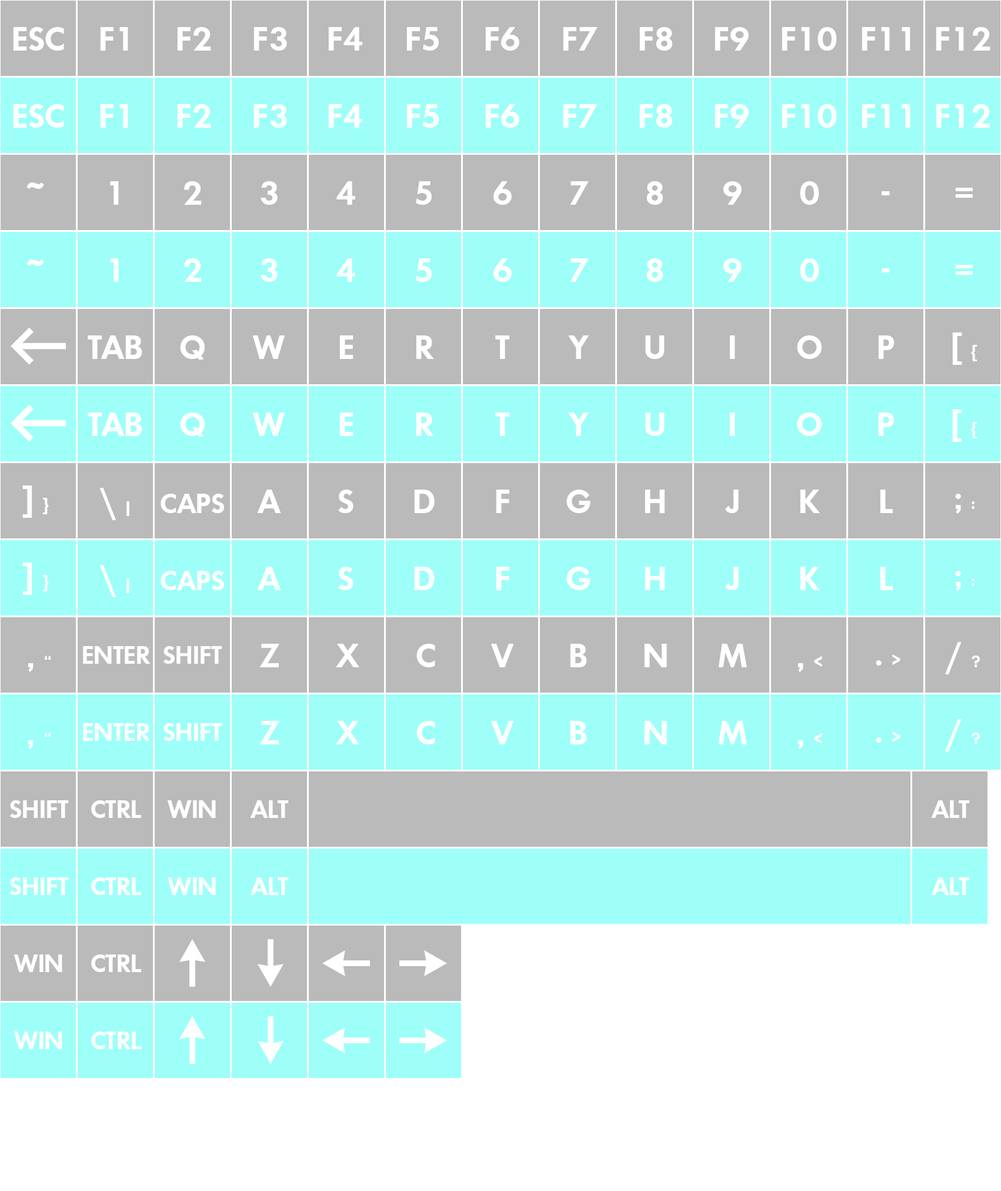
<style>
.page{position:relative;width:1001px;height:1191px;background:#bababa}
.page>*{position:absolute;margin:0}
.t1{font:35.3px "FuturaNo2D-DemiBold";color:#ffffff}
.t2{font:17.7px "FuturaNo2D-DemiBold";color:#ffffff}
.t3{font:29.4px "FuturaNo2D-DemiBold";color:#ffffff}
.t4{font:26.5px "FuturaNo2D-DemiBold";color:#ffffff}
</style>
<div class="page">
<p class="t1" style="left:13px;top:27px;width:51px;height:24px">ESC</p>
<p class="t1" style="left:100px;top:27px;width:28px;height:24px">F1</p>
<p class="t1" style="left:177px;top:27px;width:34px;height:24px">F2</p>
<p class="t1" style="left:254px;top:27px;width:33px;height:24px">F3</p>
<p class="t1" style="left:328px;top:27px;width:34px;height:24px">F4</p>
<p class="t1" style="left:407px;top:27px;width:32px;height:24px">F5</p>
<p class="t1" style="left:485px;top:27px;width:35px;height:24px">F6</p>
<p class="t1" style="left:563px;top:27px;width:35px;height:24px">F7</p>
<p class="t1" style="left:640px;top:27px;width:32px;height:24px">F8</p>
<p class="t1" style="left:715px;top:27px;width:34px;height:24px">F9</p>
<p class="t1" style="left:782px;top:27px;width:55px;height:24px">F10</p>
<p class="t1" style="left:862px;top:27px;width:49px;height:24px">F11</p>
<p class="t1" style="left:936px;top:27px;width:55px;height:24px">F12</p>
<p class="t1" style="left:13px;top:104px;width:51px;height:24px">ESC</p>
<p class="t1" style="left:100px;top:104px;width:28px;height:24px">F1</p>
<p class="t1" style="left:177px;top:104px;width:34px;height:24px">F2</p>
<p class="t1" style="left:254px;top:104px;width:33px;height:24px">F3</p>
<p class="t1" style="left:328px;top:104px;width:34px;height:24px">F4</p>
<p class="t1" style="left:407px;top:104px;width:32px;height:24px">F5</p>
<p class="t1" style="left:485px;top:104px;width:35px;height:24px">F6</p>
<p class="t1" style="left:563px;top:104px;width:35px;height:24px">F7</p>
<p class="t1" style="left:640px;top:104px;width:32px;height:24px">F8</p>
<p class="t1" style="left:715px;top:104px;width:34px;height:24px">F9</p>
<p class="t1" style="left:782px;top:104px;width:55px;height:24px">F10</p>
<p class="t1" style="left:862px;top:104px;width:49px;height:24px">F11</p>
<p class="t1" style="left:936px;top:104px;width:55px;height:24px">F12</p>
<p class="t1" style="left:26px;top:182px;width:18px;height:7px">~</p>
<p class="t1" style="left:110px;top:181px;width:9px;height:24px">1</p>
<p class="t1" style="left:184px;top:181px;width:18px;height:24px">2</p>
<p class="t1" style="left:261px;top:181px;width:17px;height:24px">3</p>
<p class="t1" style="left:337px;top:181px;width:18px;height:24px">4</p>
<p class="t1" style="left:416px;top:181px;width:16px;height:24px">5</p>
<p class="t1" style="left:494px;top:181px;width:18px;height:24px">6</p>
<p class="t1" style="left:570px;top:181px;width:19px;height:24px">7</p>
<p class="t1" style="left:647px;top:181px;width:16px;height:24px">8</p>
<p class="t1" style="left:724px;top:181px;width:18px;height:24px">9</p>
<p class="t1" style="left:800px;top:181px;width:20px;height:24px">0</p>
<p class="t1" style="left:882px;top:191px;width:8px;height:4px">-</p>
<p class="t1" style="left:955px;top:188px;width:18px;height:10px">=</p>
<p class="t1" style="left:26px;top:259px;width:18px;height:7px">~</p>
<p class="t1" style="left:110px;top:258px;width:9px;height:24px">1</p>
<p class="t1" style="left:184px;top:258px;width:18px;height:24px">2</p>
<p class="t1" style="left:261px;top:258px;width:17px;height:24px">3</p>
<p class="t1" style="left:337px;top:258px;width:18px;height:24px">4</p>
<p class="t1" style="left:416px;top:258px;width:16px;height:24px">5</p>
<p class="t1" style="left:494px;top:258px;width:18px;height:24px">6</p>
<p class="t1" style="left:570px;top:258px;width:19px;height:24px">7</p>
<p class="t1" style="left:647px;top:258px;width:16px;height:24px">8</p>
<p class="t1" style="left:724px;top:258px;width:18px;height:24px">9</p>
<p class="t1" style="left:800px;top:258px;width:20px;height:24px">0</p>
<p class="t1" style="left:882px;top:268px;width:8px;height:4px">-</p>
<p class="t1" style="left:955px;top:265px;width:18px;height:10px">=</p>
<p class="t1" style="left:88px;top:335px;width:54px;height:24px">TAB</p>
<p class="t1" style="left:180px;top:335px;width:25px;height:25px">Q</p>
<p class="t1" style="left:252px;top:335px;width:33px;height:24px">W</p>
<p class="t1" style="left:339px;top:335px;width:15px;height:24px">E</p>
<p class="t1" style="left:416px;top:335px;width:18px;height:24px">R</p>
<p class="t1" style="left:495px;top:335px;width:15px;height:24px">T</p>
<p class="t1" style="left:568px;top:335px;width:22px;height:24px">Y</p>
<p class="t1" style="left:645px;top:335px;width:20px;height:24px">U</p>
<p class="t1" style="left:730px;top:335px;width:5px;height:24px">I</p>
<p class="t1" style="left:797px;top:335px;width:25px;height:24px">O</p>
<p class="t1" style="left:878px;top:335px;width:17px;height:24px">P</p>
<p class="t1" style="left:953px;top:332px;width:24px;height:33px">[ <span class="t2">{</span></p>
<p class="t1" style="left:88px;top:412px;width:54px;height:24px">TAB</p>
<p class="t1" style="left:180px;top:412px;width:25px;height:25px">Q</p>
<p class="t1" style="left:252px;top:412px;width:33px;height:24px">W</p>
<p class="t1" style="left:339px;top:412px;width:15px;height:24px">E</p>
<p class="t1" style="left:416px;top:412px;width:18px;height:24px">R</p>
<p class="t1" style="left:495px;top:412px;width:15px;height:24px">T</p>
<p class="t1" style="left:568px;top:412px;width:22px;height:24px">Y</p>
<p class="t1" style="left:645px;top:412px;width:20px;height:24px">U</p>
<p class="t1" style="left:730px;top:412px;width:5px;height:24px">I</p>
<p class="t1" style="left:797px;top:412px;width:25px;height:24px">O</p>
<p class="t1" style="left:878px;top:412px;width:17px;height:24px">P</p>
<p class="t1" style="left:953px;top:409px;width:24px;height:33px">[ <span class="t2">{</span></p>
<p class="t1" style="left:22px;top:485px;width:27px;height:33px">] <span class="t2">}</span></p>
<p class="t1" style="left:99px;top:488px;width:30px;height:32px">\ <span class="t2">|</span></p>
<p class="t3" style="left:161px;top:494px;width:63px;height:19px">CAPS</p>
<p class="t1" style="left:257px;top:490px;width:24px;height:23px">A</p>
<p class="t1" style="left:338px;top:490px;width:16px;height:23px">S</p>
<p class="t1" style="left:414px;top:490px;width:21px;height:23px">D</p>
<p class="t1" style="left:496px;top:490px;width:14px;height:23px">F</p>
<p class="t1" style="left:567px;top:490px;width:24px;height:23px">G</p>
<p class="t1" style="left:645px;top:490px;width:20px;height:23px">H</p>
<p class="t1" style="left:725px;top:490px;width:14px;height:23px">J</p>
<p class="t1" style="left:800px;top:490px;width:20px;height:23px">K</p>
<p class="t1" style="left:880px;top:490px;width:13px;height:23px">L</p>
<p class="t1" style="left:955px;top:494px;width:20px;height:20px">; <span class="t2">:</span></p>
<p class="t1" style="left:22px;top:562px;width:27px;height:33px">] <span class="t2">}</span></p>
<p class="t1" style="left:99px;top:565px;width:30px;height:32px">\ <span class="t2">|</span></p>
<p class="t1" style="left:257px;top:567px;width:24px;height:23px">A</p>
<p class="t1" style="left:338px;top:567px;width:16px;height:23px">S</p>
<p class="t1" style="left:414px;top:567px;width:21px;height:23px">D</p>
<p class="t1" style="left:496px;top:567px;width:14px;height:23px">F</p>
<p class="t1" style="left:567px;top:567px;width:24px;height:23px">G</p>
<p class="t1" style="left:645px;top:567px;width:20px;height:23px">H</p>
<p class="t1" style="left:725px;top:567px;width:14px;height:23px">J</p>
<p class="t1" style="left:800px;top:567px;width:20px;height:23px">K</p>
<p class="t1" style="left:880px;top:567px;width:13px;height:23px">L</p>
<p class="t3" style="left:161px;top:571px;width:63px;height:19px">CAPS</p>
<p class="t1" style="left:955px;top:571px;width:20px;height:20px">; <span class="t2">:</span></p>
<p class="t1" style="left:945px;top:642px;width:35px;height:32px">/ <span class="t2">?</span></p>
<p class="t4" style="left:83px;top:646px;width:68px;height:18px">ENTER</p>
<p class="t4" style="left:164px;top:646px;width:58px;height:18px">SHIFT</p>
<p class="t1" style="left:259px;top:644px;width:20px;height:23px">Z</p>
<p class="t1" style="left:336px;top:644px;width:23px;height:23px">X</p>
<p class="t1" style="left:417px;top:644px;width:18px;height:23px">C</p>
<p class="t1" style="left:491px;top:644px;width:23px;height:23px">V</p>
<p class="t1" style="left:570px;top:644px;width:17px;height:23px">B</p>
<p class="t1" style="left:644px;top:644px;width:23px;height:23px">N</p>
<p class="t1" style="left:718px;top:644px;width:29px;height:23px">M</p>
<p class="t1" style="left:28px;top:655px;width:23px;height:17px">‚ <span class="t2">“</span></p>
<p class="t1" style="left:798px;top:656px;width:25px;height:16px">, <span class="t2">&lt;</span></p>
<p class="t1" style="left:876px;top:654px;width:25px;height:11px">. <span class="t2">&gt;</span></p>
<p class="t4" style="left:83px;top:723px;width:68px;height:18px">ENTER</p>
<p class="t4" style="left:164px;top:723px;width:58px;height:18px">SHIFT</p>
<p class="t1" style="left:259px;top:721px;width:20px;height:23px">Z</p>
<p class="t1" style="left:336px;top:721px;width:23px;height:23px">X</p>
<p class="t1" style="left:417px;top:721px;width:18px;height:23px">C</p>
<p class="t1" style="left:491px;top:721px;width:23px;height:23px">V</p>
<p class="t1" style="left:570px;top:721px;width:17px;height:23px">B</p>
<p class="t1" style="left:644px;top:721px;width:23px;height:23px">N</p>
<p class="t1" style="left:718px;top:721px;width:29px;height:23px">M</p>
<p class="t1" style="left:945px;top:719px;width:35px;height:32px">/ <span class="t2">?</span></p>
<p class="t1" style="left:28px;top:732px;width:23px;height:17px">‚ <span class="t2">“</span></p>
<p class="t1" style="left:798px;top:733px;width:25px;height:16px">, <span class="t2">&lt;</span></p>
<p class="t1" style="left:876px;top:731px;width:25px;height:11px">. <span class="t2">&gt;</span></p>
<p class="t4" style="left:10px;top:800px;width:59px;height:18px">SHIFT</p>
<p class="t4" style="left:91px;top:800px;width:50px;height:18px">CTRL</p>
<p class="t4" style="left:168px;top:800px;width:48px;height:18px">WIN</p>
<p class="t4" style="left:250px;top:800px;width:39px;height:18px">ALT</p>
<p class="t4" style="left:931px;top:800px;width:39px;height:18px">ALT</p>
<p class="t4" style="left:10px;top:877px;width:59px;height:18px">SHIFT</p>
<p class="t4" style="left:91px;top:877px;width:50px;height:18px">CTRL</p>
<p class="t4" style="left:168px;top:877px;width:48px;height:18px">WIN</p>
<p class="t4" style="left:250px;top:877px;width:39px;height:18px">ALT</p>
<p class="t4" style="left:931px;top:877px;width:39px;height:18px">ALT</p>
<p class="t4" style="left:14px;top:954px;width:48px;height:18px">WIN</p>
<p class="t4" style="left:91px;top:954px;width:50px;height:18px">CTRL</p>
<p class="t4" style="left:14px;top:1031px;width:48px;height:18px">WIN</p>
<p class="t4" style="left:91px;top:1031px;width:50px;height:18px">CTRL</p>
</div>
